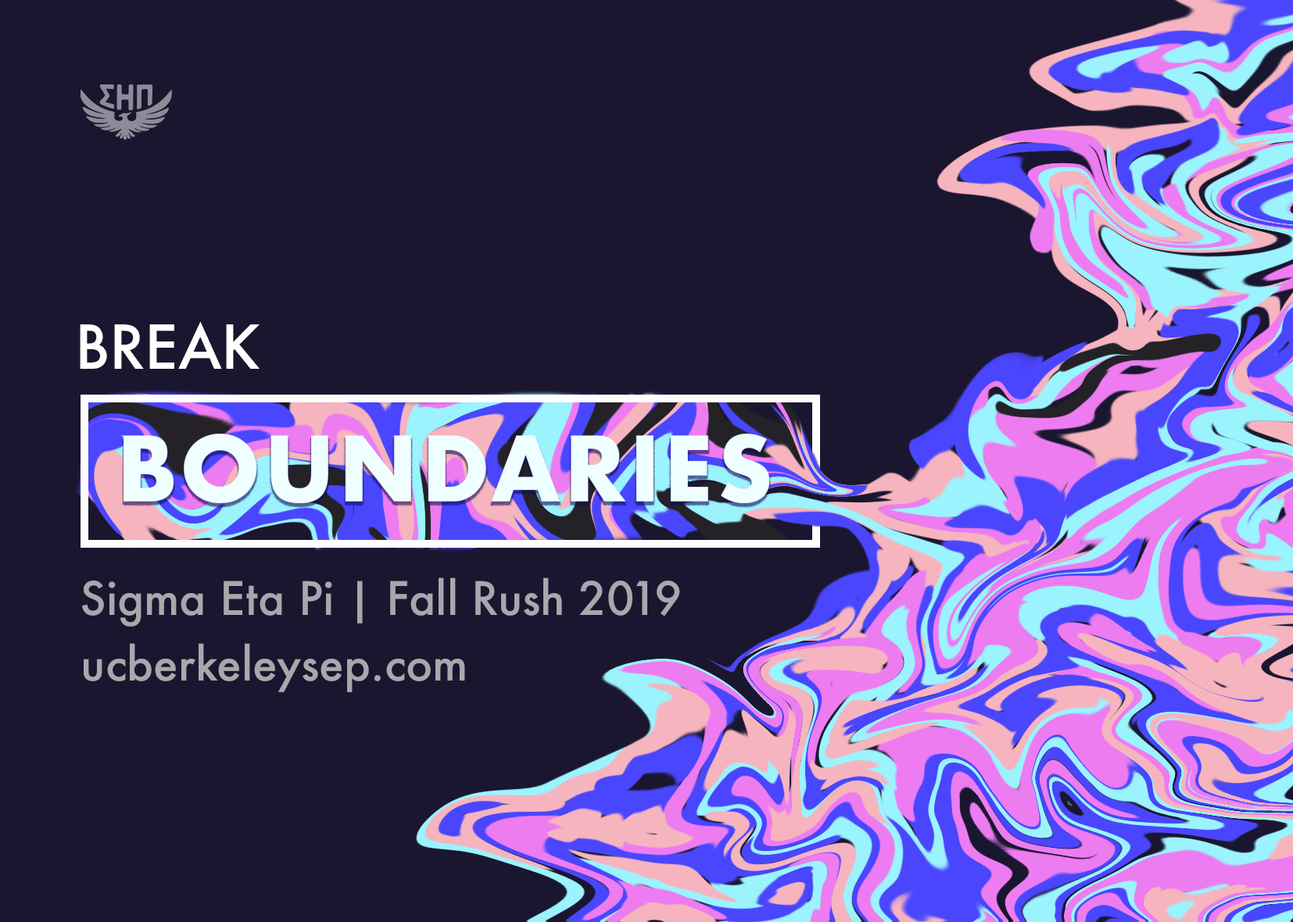
<style>
.page{position:relative;width:1293px;height:922px;background:#1a162f}
.page>*{position:absolute;margin:0}
.t1{font:58.7px "Futura-Medium";color:#ffffff}
.t2{font:44.7px "Futura-Medium";color:#a8a7ac}
</style>
<div class="page">
<p class="t1" style="left:80px;top:321px;width:180px;height:48px">BREAK</p>
<p class="t2" style="left:82px;top:578px;width:598px;height:49px">Sigma Eta Pi | Fall Rush 2019</p>
<p class="t2" style="left:84px;top:643px;width:381px;height:50px">ucberkeleysep.com</p>
</div>
